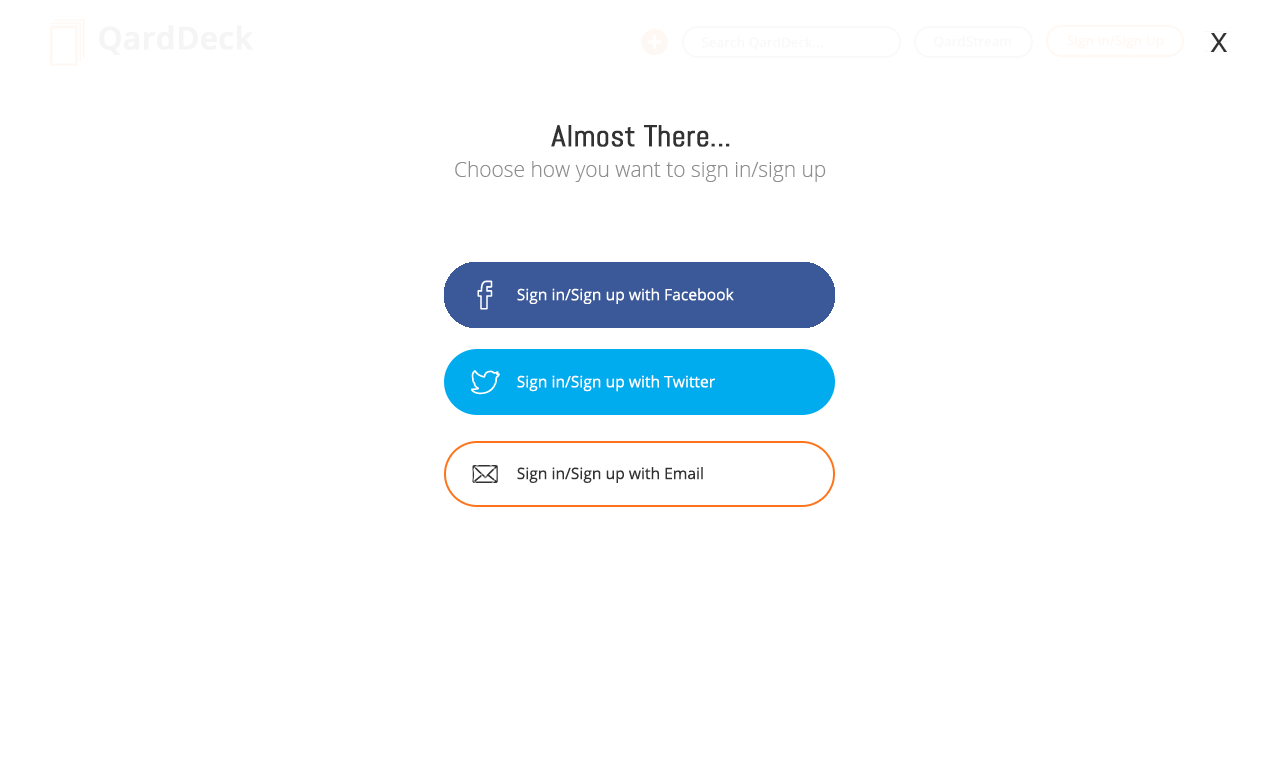
<style>
.page{position:relative;width:1280px;height:768px;background:#ffffff}
.page>*{position:absolute;margin:0}
.t1{font:30.9px "OpenSans-Semibold";color:#f5f5f5;font-weight:bold}
.t2{font:13px "OpenSans";color:#f9f9f9;font-weight:bold}
.t3{font:13px "OpenSans";color:#fff8f3;font-weight:bold}
.t4{font:34.3px "OpenSans";color:#323232}
.t5{font:30px "Abel-Regular";color:#323232;font-weight:bold}
.t6{font:20.9px "OpenSans-Light";color:#8d8d8d}
.t7{font:15.7px "OpenSans";color:#ffffff}
.t8{font:15.7px "OpenSans";color:#323232}
</style>
<div class="page">
<p class="t1" style="left:99px;top:25px;width:154px;height:30px">QardDeck</p>
<p class="t2" style="left:702px;top:36px;width:122px;height:14px">Search QardDeck...</p>
<p class="t2" style="left:934px;top:35px;width:77px;height:14px">QardStream</p>
<p class="t3" style="left:1067px;top:35px;width:97px;height:14px">Sign in/Sign Up</p>
<p class="t4" style="left:1210px;top:33px;width:17px;height:19px">x</p>
<p class="t5" style="left:551px;top:125px;width:179px;height:22px">Almost There...</p>
<p class="t6" style="left:455px;top:161px;width:371px;height:21px">Choose how you want to sign in/sign up</p>
<p class="t7" style="left:517px;top:288px;width:217px;height:16px">Sign in/Sign up with Facebook</p>
<p class="t7" style="left:517px;top:375px;width:198px;height:17px">Sign in/Sign up with Twitter</p>
<p class="t8" style="left:517px;top:467px;width:186px;height:16px">Sign in/Sign up with Email</p>
</div>
